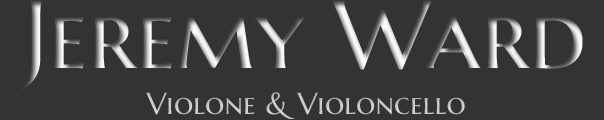
<style>
.page{position:relative;width:604px;height:120px;background:#333333}
.page>*{position:absolute;margin:0}
.t1{font:96px "MarcellusSC-Regular"}
.t2{font:30.4px "MarcellusSC-Regular";color:#ccc9c9}
</style>
<div class="page">
<p class="t1" style="left:22px;top:0px;width:561px;height:90px">Jeremy Ward</p>
<p class="t2" style="left:146px;top:92px;width:319px;height:27px">Violone &amp; Violoncello</p>
</div>
